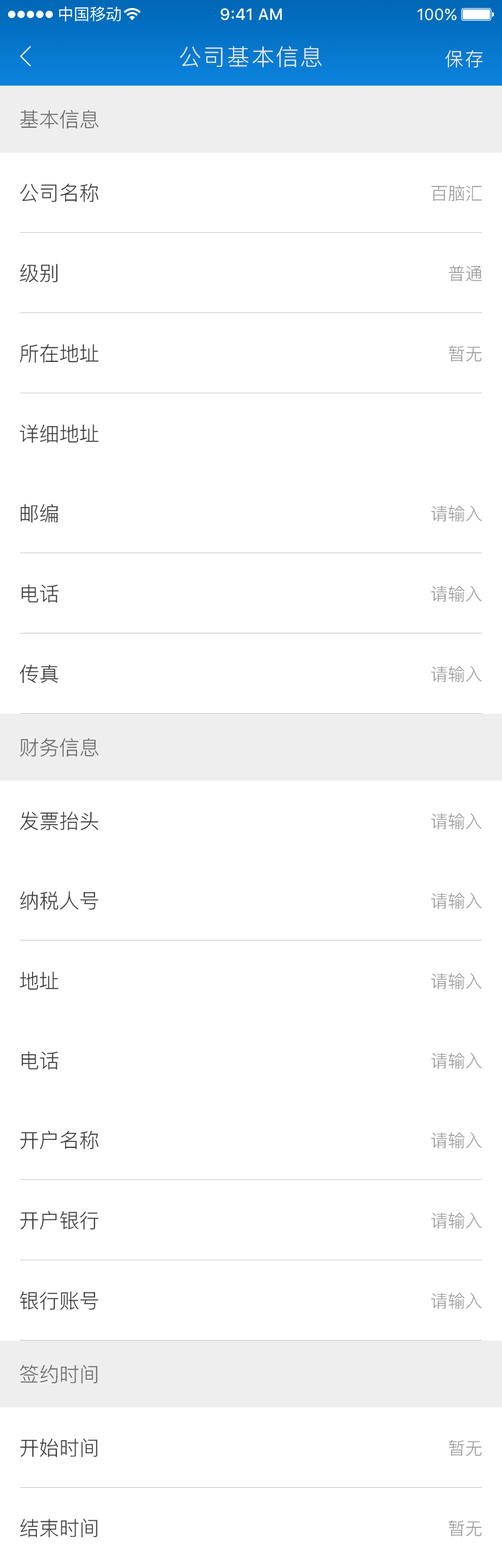
<style>
.page{position:relative;width:502px;height:1568px;background:#ffffff}
.page>*{position:absolute;margin:0}
.t1{font:22.7px "PingFang-SC-Regular";letter-spacing:0.06em;color:#eeeeee}
.t2{font:18.7px "PingFang-SC-Regular";letter-spacing:0.06em;color:#eeeeee}
.t3{font:20.1px "PingFang-SC-Regular";color:#666666}
.t4{font:20.1px "PingFang-SC-Regular";color:#333333}
.t5{font:17.4px "PingFang-SC-Regular";color:#999999}
</style>
<div class="page">
<p class="t1" style="left:179px;top:46px;width:143px;height:22px">公司基本信息</p>
<p class="t2" style="left:445px;top:50px;width:37px;height:18px">保存</p>
<p class="t3" style="left:20px;top:110px;width:79px;height:19px">基本信息</p>
<p class="t4" style="left:20px;top:183px;width:78px;height:19px">公司名称</p>
<p class="t5" style="left:431px;top:185px;width:51px;height:16px">百脑汇</p>
<p class="t4" style="left:19px;top:264px;width:39px;height:18px">级别</p>
<p class="t5" style="left:448px;top:265px;width:34px;height:17px">普通</p>
<p class="t4" style="left:19px;top:344px;width:80px;height:19px">所在地址</p>
<p class="t5" style="left:448px;top:345px;width:34px;height:17px">暂无</p>
<p class="t4" style="left:19px;top:424px;width:80px;height:19px">详细地址</p>
<p class="t4" style="left:20px;top:504px;width:38px;height:19px">邮编</p>
<p class="t5" style="left:431px;top:505px;width:51px;height:17px">请输入</p>
<p class="t4" style="left:21px;top:584px;width:38px;height:19px">电话</p>
<p class="t5" style="left:431px;top:585px;width:51px;height:17px">请输入</p>
<p class="t4" style="left:19px;top:664px;width:39px;height:20px">传真</p>
<p class="t5" style="left:431px;top:666px;width:51px;height:16px">请输入</p>
<p class="t3" style="left:19px;top:738px;width:80px;height:19px">财务信息</p>
<p class="t4" style="left:19px;top:811px;width:79px;height:20px">发票抬头</p>
<p class="t5" style="left:431px;top:813px;width:51px;height:16px">请输入</p>
<p class="t4" style="left:20px;top:891px;width:78px;height:19px">纳税人号</p>
<p class="t5" style="left:431px;top:892px;width:51px;height:17px">请输入</p>
<p class="t4" style="left:19px;top:971px;width:40px;height:19px">地址</p>
<p class="t5" style="left:431px;top:973px;width:51px;height:16px">请输入</p>
<p class="t4" style="left:21px;top:1051px;width:38px;height:19px">电话</p>
<p class="t5" style="left:431px;top:1052px;width:51px;height:17px">请输入</p>
<p class="t4" style="left:20px;top:1131px;width:78px;height:18px">开户名称</p>
<p class="t5" style="left:431px;top:1132px;width:51px;height:17px">请输入</p>
<p class="t4" style="left:20px;top:1211px;width:79px;height:19px">开户银行</p>
<p class="t5" style="left:431px;top:1212px;width:51px;height:17px">请输入</p>
<p class="t4" style="left:19px;top:1291px;width:79px;height:19px">银行账号</p>
<p class="t5" style="left:431px;top:1292px;width:51px;height:17px">请输入</p>
<p class="t3" style="left:20px;top:1365px;width:78px;height:19px">签约时间</p>
<p class="t4" style="left:20px;top:1438px;width:78px;height:20px">开始时间</p>
<p class="t5" style="left:448px;top:1440px;width:34px;height:16px">暂无</p>
<p class="t4" style="left:20px;top:1518px;width:78px;height:20px">结束时间</p>
<p class="t5" style="left:448px;top:1520px;width:34px;height:17px">暂无</p>
</div>
